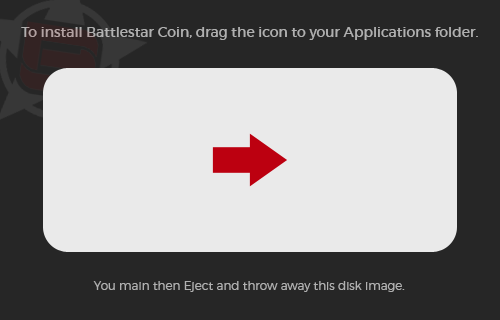
<style>
.page{position:relative;width:500px;height:320px;background:#262626}
.page>*{position:absolute;margin:0}
.t1{font:14px "Montserrat-Regular";color:#b0b0b0}
.t2{font:12px "Montserrat-Light";color:#b0b0b0}
</style>
<div class="page">
<p class="t1" style="left:21px;top:27px;width:457px;height:13px">To install Battlestar Coin, drag the icon to your Applications folder.</p>
<p class="t2" style="left:93px;top:281px;width:312px;height:11px">You main then Eject and throw away this disk image.</p>
</div>
